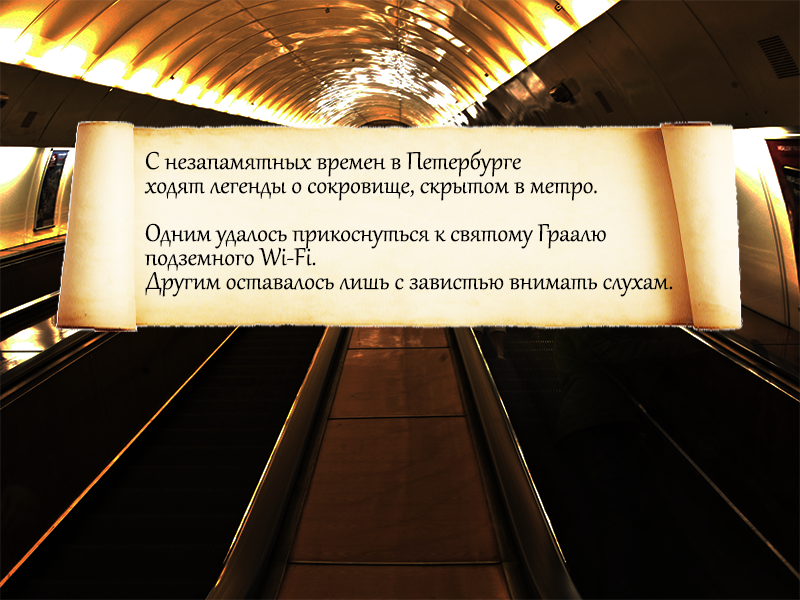
<style>
.page{position:relative;width:800px;height:600px}
.page>*{position:absolute;margin:0}
.t1{font:30px/24px "Gabriola";color:#000000}
</style>
<div class="page">
<p class="t1" style="left:144px;top:149px;width:529px;height:148px">С незапамятных времен в Петербурге <br>ходят легенды о сокровище, скрытом в метро.<br><br>Одним удалось прикоснуться к святому Граалю <br>подземного Wi-Fi.<br>Другим оставалось лишь с завистью внимать слухам.</p>
</div>
